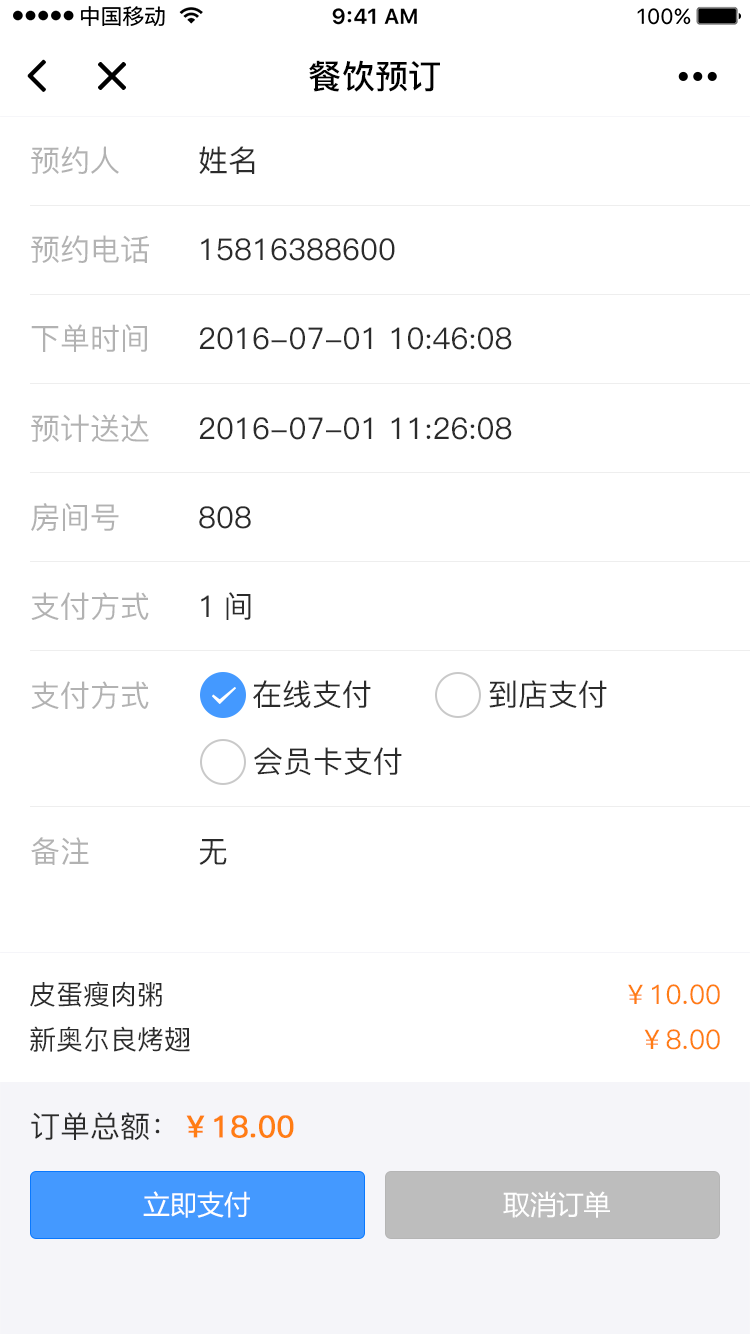
<style>
.page{position:relative;width:750px;height:1334px;background:#ffffff}
.page>*{position:absolute;margin:0}
.t1{font:33.2px "PingFang-SC-Bold";color:#000000}
.t2{font:30px "PingFang-SC-Medium";color:#b2b2b2}
.t3{font:30px "PingFang-SC-Medium";color:#2b2b2b}
.t4{font:27px "PingFang-SC-Medium";color:#2b2b2b}
.t5{font:27px "PingFang-SC-Medium";color:#ff7d13}
.t6{font:30px "PingFang-SC-Medium";color:#ff7d13;font-weight:bold}
.t7{font:27px "MicrosoftYaHei";color:#ffffff}
</style>
<div class="page">
<p class="t1" style="left:309px;top:60px;width:131px;height:32px">餐饮预订</p>
<p class="t2" style="left:31px;top:146px;width:88px;height:28px">预约人</p>
<p class="t3" style="left:199px;top:146px;width:56px;height:28px">姓名</p>
<p class="t2" style="left:31px;top:235px;width:118px;height:28px">预约电话</p>
<p class="t3" style="left:201px;top:238px;width:194px;height:23px">15816388600</p>
<p class="t2" style="left:31px;top:324px;width:116px;height:28px">下单时间</p>
<p class="t3" style="left:199px;top:327px;width:313px;height:23px">2016-07-01 10:46:08</p>
<p class="t2" style="left:31px;top:414px;width:118px;height:28px">预计送达</p>
<p class="t3" style="left:199px;top:417px;width:313px;height:23px">2016-07-01 11:26:08</p>
<p class="t2" style="left:31px;top:503px;width:88px;height:28px">房间号</p>
<p class="t3" style="left:199px;top:506px;width:52px;height:23px">808</p>
<p class="t2" style="left:31px;top:592px;width:118px;height:28px">支付方式</p>
<p class="t3" style="left:201px;top:592px;width:50px;height:28px">1间</p>
<p class="t2" style="left:31px;top:681px;width:118px;height:28px">支付方式</p>
<p class="t3" style="left:253px;top:680px;width:118px;height:28px">在线支付</p>
<p class="t3" style="left:489px;top:680px;width:118px;height:28px">到店支付</p>
<p class="t3" style="left:254px;top:747px;width:148px;height:29px">会员卡支付</p>
<p class="t2" style="left:31px;top:837px;width:58px;height:28px">备注</p>
<p class="t3" style="left:199px;top:839px;width:28px;height:26px">无</p>
<p class="t4" style="left:30px;top:981px;width:132px;height:26px">皮蛋瘦肉粥</p>
<p class="t5" style="left:628px;top:984px;width:92px;height:21px">￥10.00</p>
<p class="t4" style="left:30px;top:1026px;width:160px;height:26px">新奥尔良烤翅</p>
<p class="t5" style="left:644px;top:1029px;width:76px;height:21px">￥8.00</p>
<p class="t6" style="left:31px;top:1112px;width:263px;height:28px"><span class="t3">订单总额：</span>￥18.00</p>
<p class="t7" style="left:143px;top:1191px;width:107px;height:27px">立即支付</p>
<p class="t7" style="left:503px;top:1191px;width:107px;height:27px">取消订单</p>
</div>
